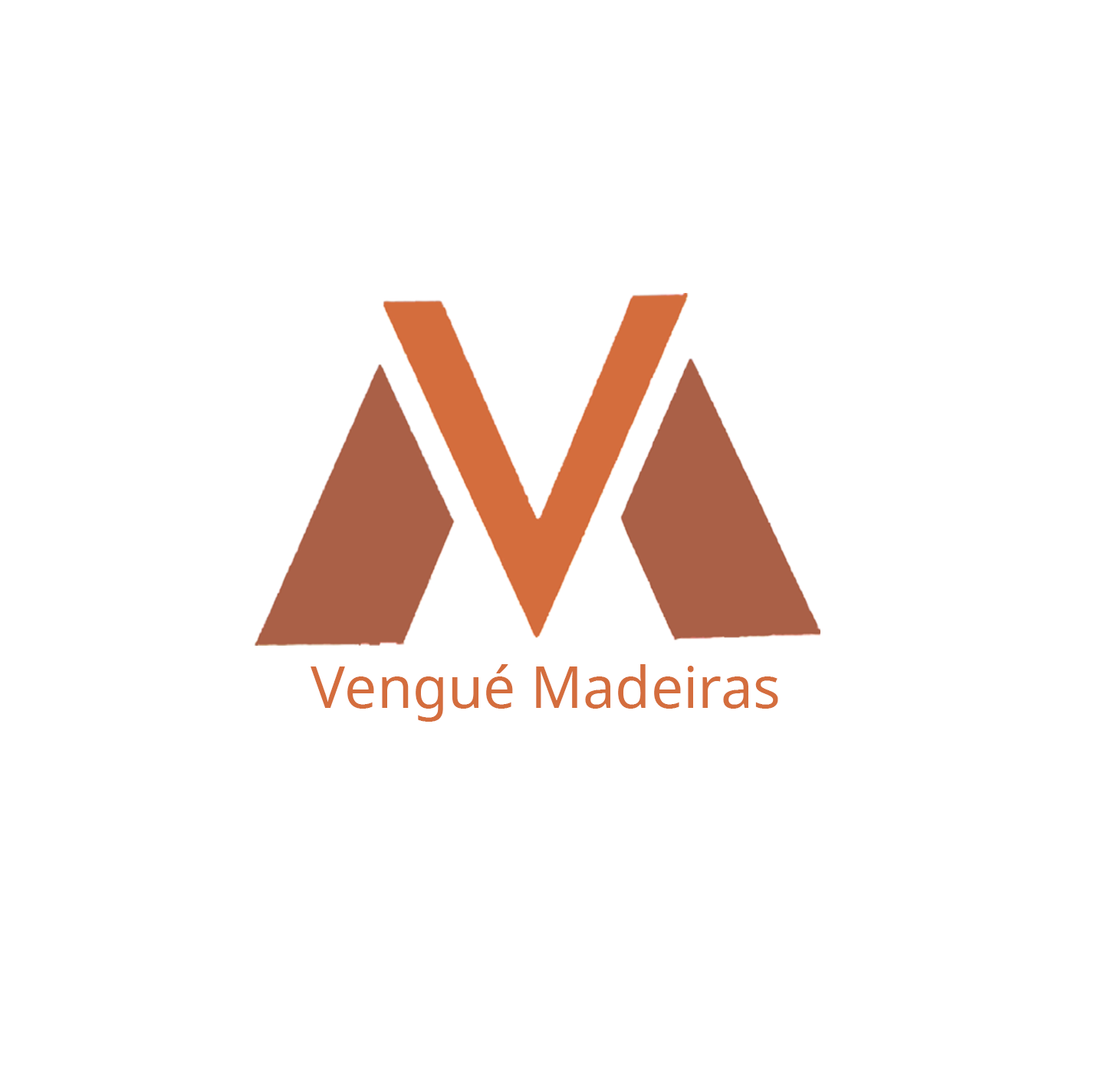
<style>
.page{position:relative;width:1098px;height:1086px;background:#ffffff}
.page>*{position:absolute;margin:0}
.t1{font:57.5px "NotoSans";color:#d46d3d}
</style>
<div class="page">
<p class="t1" style="left:311px;top:664px;width:467px;height:58px">Vengué Madeiras</p>
</div>
